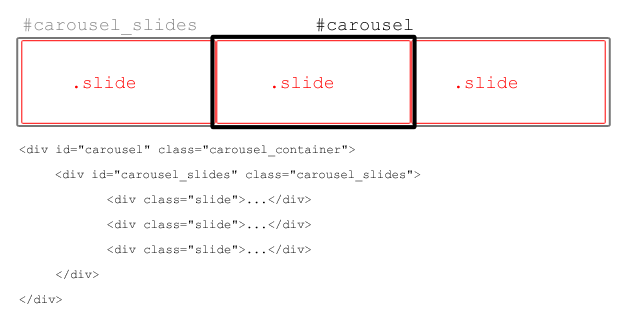
<style>
.page{position:relative;width:640px;height:323px;background:#ffffff}
.page>*{position:absolute;margin:0}
.t1{font:18px "CourierNewPSMT";letter-spacing:0.01em;color:#868686}
.t2{font:18px "CourierNewPSMT";letter-spacing:0.01em;color:#000000}
.t3{font:18px "CourierNewPSMT";letter-spacing:0.01em;color:#ff0000}
.t4{font:12px/18px "CourierNewPSMT";letter-spacing:0.01em;color:#000000}
</style>
<div class="page">
<p class="t1" style="left:23px;top:18px;width:173px;height:17px">#carousel_slides</p>
<p class="t2" style="left:316px;top:18px;width:97px;height:14px">#carousel</p>
<p class="t3" style="left:75px;top:76px;width:60px;height:13px">.slide</p>
<p class="t3" style="left:273px;top:76px;width:60px;height:13px">.slide</p>
<p class="t3" style="left:457px;top:76px;width:60px;height:13px">.slide</p>
<p class="t4" style="left:19px;top:145px;width:402px;height:159px">&lt;div id="carousel" class="carousel_container"&gt;<br>     &lt;div id="carousel_slides" class="carousel_slides"&gt;<br>            &lt;div class="slide"&gt;...&lt;/div&gt;<br>            &lt;div class="slide"&gt;...&lt;/div&gt;<br>            &lt;div class="slide"&gt;...&lt;/div&gt;<br>     &lt;/div&gt;<br>&lt;/div&gt;</p>
</div>
